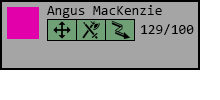
<style>
.page{position:relative;width:220px;height:100px;background:#a5a5a5}
.page>*{position:absolute;margin:0}
.t1{font:14px "Consolas";color:#000000}
</style>
<div class="page">
<p class="t1" style="left:47px;top:5px;width:115px;height:13px">Angus MacKenzie</p>
<p class="t1" style="left:141px;top:24px;width:53px;height:11px">129/100</p>
</div>
